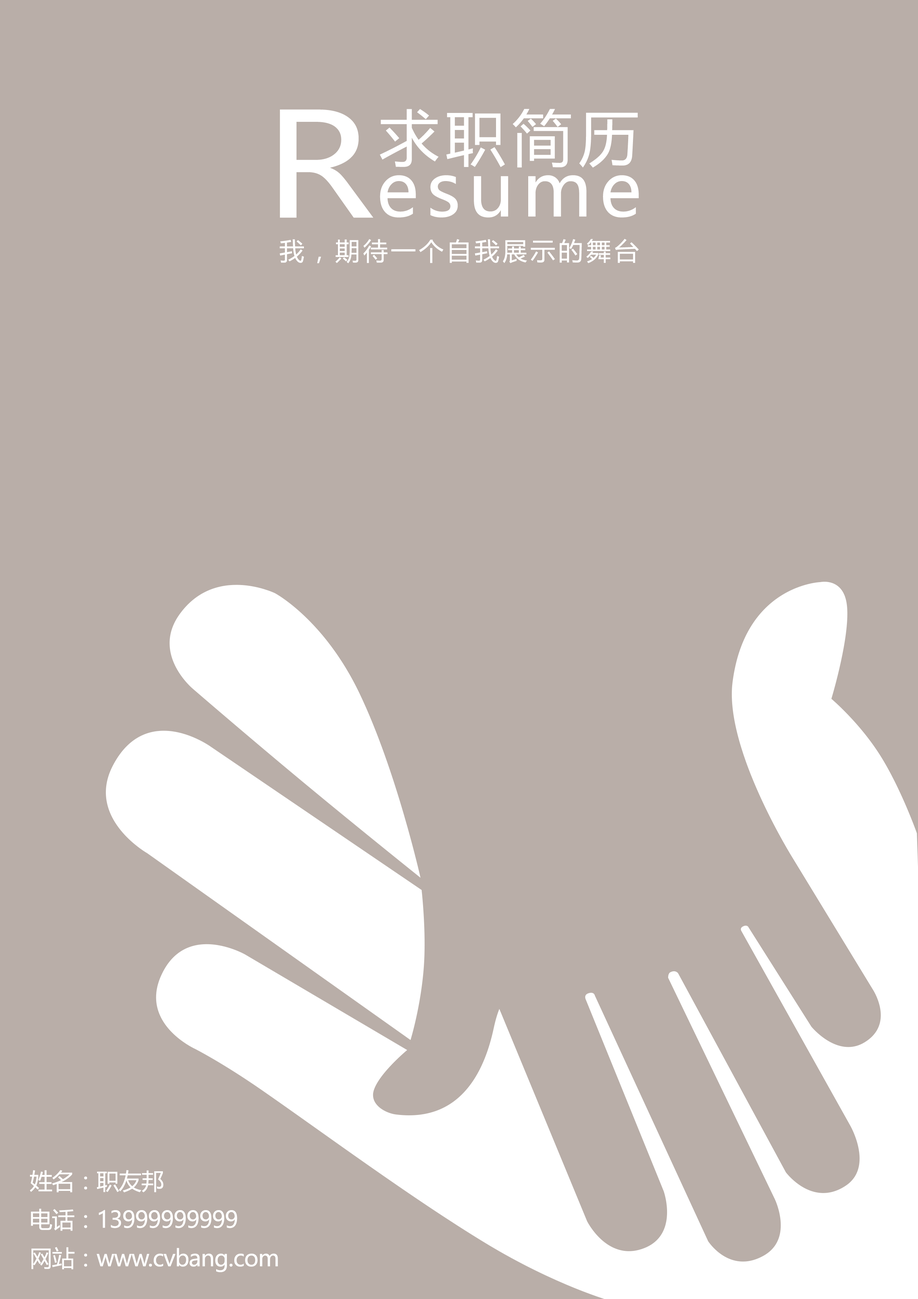
<style>
.page{position:relative;width:918px;height:1299px;background:#b9aea8}
.page>*{position:absolute;margin:0}
.t1{font:24.7px "MicrosoftYaHei";letter-spacing:0.13em;color:#ffffff}
.t2{font:22.9px/38.6px "MicrosoftYaHei";letter-spacing:-0.025em;color:#ffffff}
</style>
<div class="page">
<p class="t1" style="left:280px;top:239px;width:359px;height:24px">我，期待一个自我展示的舞台</p>
<p class="t2" style="left:30px;top:1170px;width:248px;height:102px">姓名：职友邦<br>电话：13999999999<br>网站：www.cvbang.com</p>
</div>
